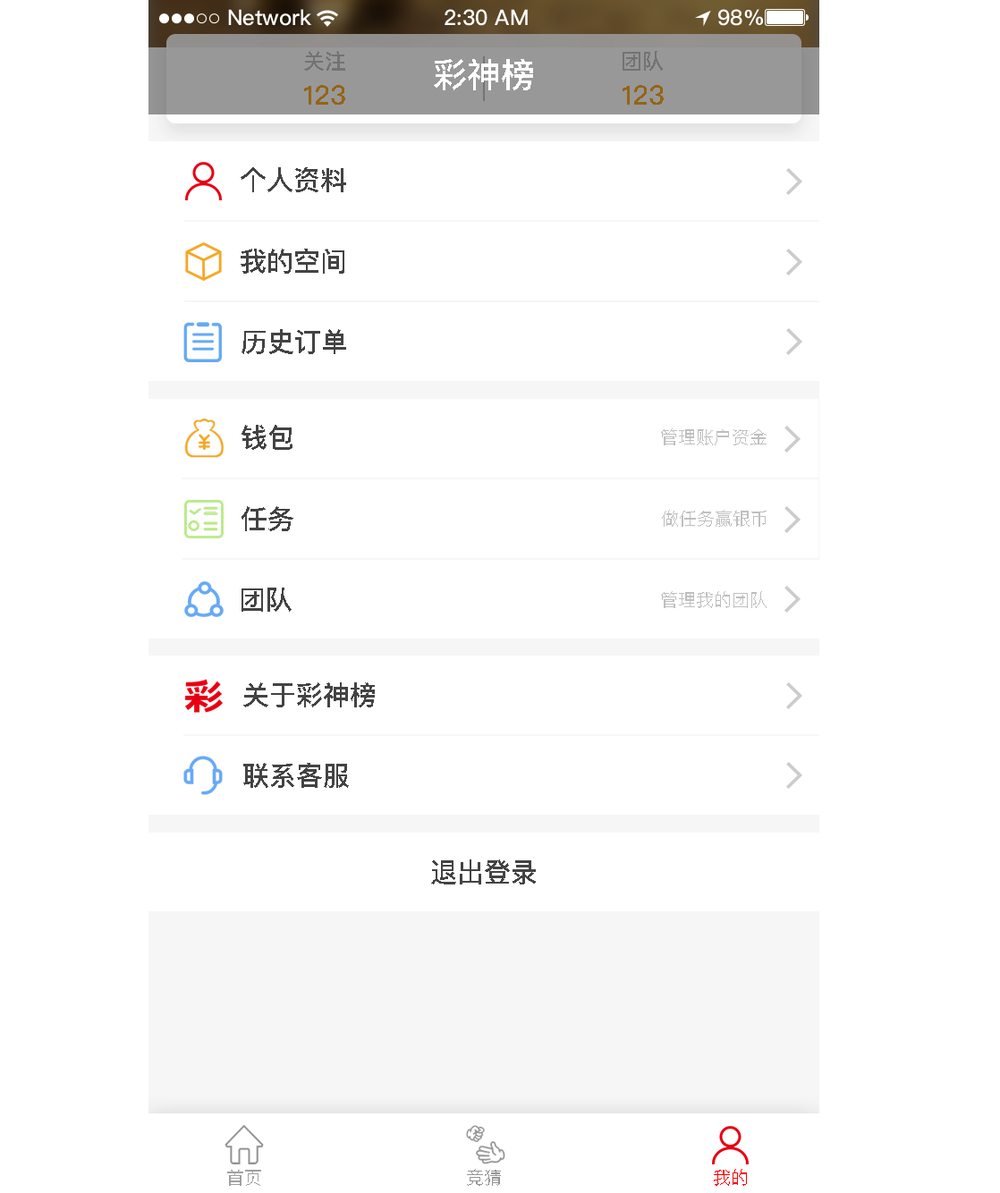
<style>
.page{position:relative;width:1000px;height:1193px;background:#ffffff}
.page>*{position:absolute;margin:0}
.t1{font:21.5px "PingFangSC-Medium";color:#737373;text-transform:uppercase}
.t2{font:34px "PingFangSC-Medium";color:#ffffff;text-transform:uppercase}
.t3{font:26.8px "PingFangSC-Medium";color:#946415;text-transform:uppercase}
.t4{font:26.8px "PingFangSC-Medium";color:#434343;text-transform:uppercase}
.t5{font:17.9px "PingFangSC-Regular";color:#bfbfbf;text-transform:uppercase}
.t6{font:17.9px "PingFangSC-Regular";color:#a0a0a0;text-transform:uppercase}
.t7{font:17.9px "PingFangSC-Regular";color:#959595;text-transform:uppercase}
.t8{font:17.9px "PingFangSC-Regular";color:#ff0000;text-transform:uppercase}
</style>
<div class="page">
<p class="t1" style="left:304px;top:51px;width:41px;height:20px">关注</p>
<p class="t1" style="left:622px;top:51px;width:41px;height:20px">团队</p>
<p class="t2" style="left:434px;top:59px;width:99px;height:31px">彩神榜</p>
<p class="t3" style="left:304px;top:85px;width:41px;height:20px">123</p>
<p class="t3" style="left:622px;top:85px;width:41px;height:20px">123</p>
<p class="t4" style="left:241px;top:167px;width:105px;height:25px">个人资料</p>
<p class="t4" style="left:241px;top:249px;width:103px;height:25px">我的空间</p>
<p class="t4" style="left:241px;top:329px;width:105px;height:25px">历史订单</p>
<p class="t4" style="left:241px;top:425px;width:51px;height:25px">钱包</p>
<p class="t5" style="left:661px;top:428px;width:105px;height:17px">管理账户资金</p>
<p class="t4" style="left:241px;top:506px;width:52px;height:25px">任务</p>
<p class="t5" style="left:662px;top:510px;width:104px;height:17px">做任务赢银币</p>
<p class="t4" style="left:241px;top:587px;width:50px;height:25px">团队</p>
<p class="t5" style="left:661px;top:591px;width:105px;height:17px">管理我的团队</p>
<p class="t4" style="left:243px;top:682px;width:132px;height:25px">关于彩神榜</p>
<p class="t4" style="left:243px;top:763px;width:106px;height:25px">联系客服</p>
<p class="t4" style="left:431px;top:859px;width:105px;height:25px">退出登录</p>
<p class="t6" style="left:227px;top:1170px;width:34px;height:16px">首页</p>
<p class="t7" style="left:467px;top:1169px;width:34px;height:17px">竞猜</p>
<p class="t8" style="left:714px;top:1169px;width:33px;height:17px">我的</p>
</div>
